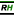
<style>
.page{position:relative;width:14px;height:16px;background:#ffffff}
.page>*{position:absolute;margin:0}
.t1{font:8px "Arial-BoldItalicMT";color:#010101}
.t2{font:8px "Arial-BoldItalicMT";color:#19780c}
</style>
<div class="page">
<p class="t1" style="left:1px;top:4px;width:12px;height:7px">R<span class="t2">H</span></p>
</div>
